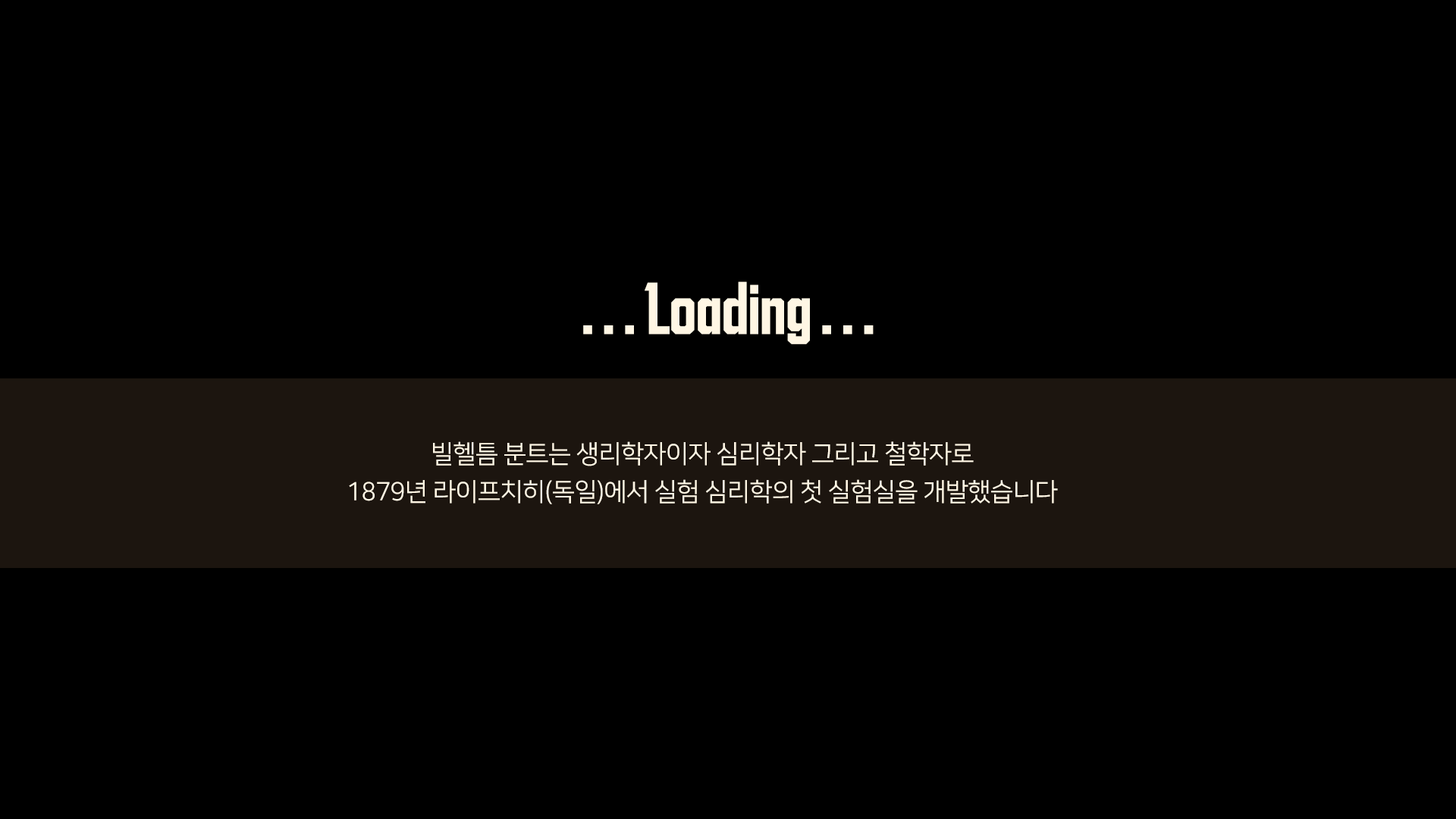
<style>
.page{position:relative;width:1456px;height:819px;background:#000000}
.page>*{position:absolute;margin:0}
.t1{font:56.9px "VITRO-INSPIRE-OTF";letter-spacing:-0.025em;color:#fff6e4}
.t2{font:25.3px/37.9px "NanumSquareR";letter-spacing:-0.025em;color:#fff6e4}
</style>
<div class="page">
<p class="t1" style="left:583px;top:281px;width:291px;height:63px">. . . Loading . . .</p>
<p class="t2" style="left:349px;top:441px;width:709px;height:63px;text-align:center">빌헬틈 분트는 생리학자이자 심리학자 그리고 철학자로<br>1879년 라이프치히(독일)에서 실험 심리학의 첫 실험실을 개발했습니다</p>
</div>
